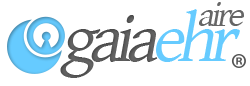
<style>
.page{position:relative;width:250px;height:86px;background:#ffffff}
.page>*{position:absolute;margin:0}
.t1{font:36px "GentiumBasic";letter-spacing:-0.1em;color:#666666;font-style:italic}
.t2{font:69.2px "GentiumBasic";letter-spacing:-0.1em;color:#666666;font-style:italic}
.t3{font:69.2px "GentiumBasic";letter-spacing:-0.1em;color:#66cbff;font-style:italic}
</style>
<div class="page">
<p class="t1" style="left:199px;top:2px;width:45px;height:24px">aire</p>
<p class="t2" style="left:91px;top:15px;width:67px;height:47px">aia</p>
<p class="t3" style="left:156px;top:9px;width:84px;height:53px">ehr</p>
<p class="t2" style="left:60px;top:29px;width:41px;height:49px">g</p>
</div>
